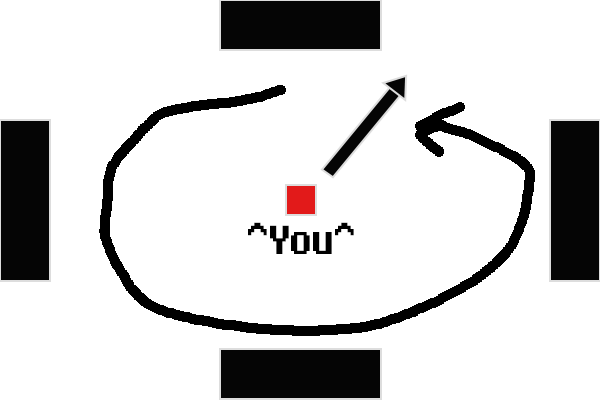
<style>
.page{position:relative;width:600px;height:400px;background:#ffffff}
.page>*{position:absolute;margin:0}
.t1{font:50px "8bitoperator-JVE";color:#000000}
</style>
<div class="page">
<p class="t1" style="left:248px;top:222px;width:106px;height:32px">^You^</p>
</div>
